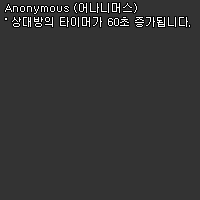
<style>
.page{position:relative;width:200px;height:200px;background:#333333}
.page>*{position:absolute;margin:0}
.t1{font:11px/14px "Dotum";color:#ffffff}
</style>
<div class="page">
<p class="t1" style="left:5px;top:3px;width:185px;height:24px">Anonymous (어나니머스)<br>˚ 상대방의 타이머가 60초 증가됩니다.</p>
</div>
